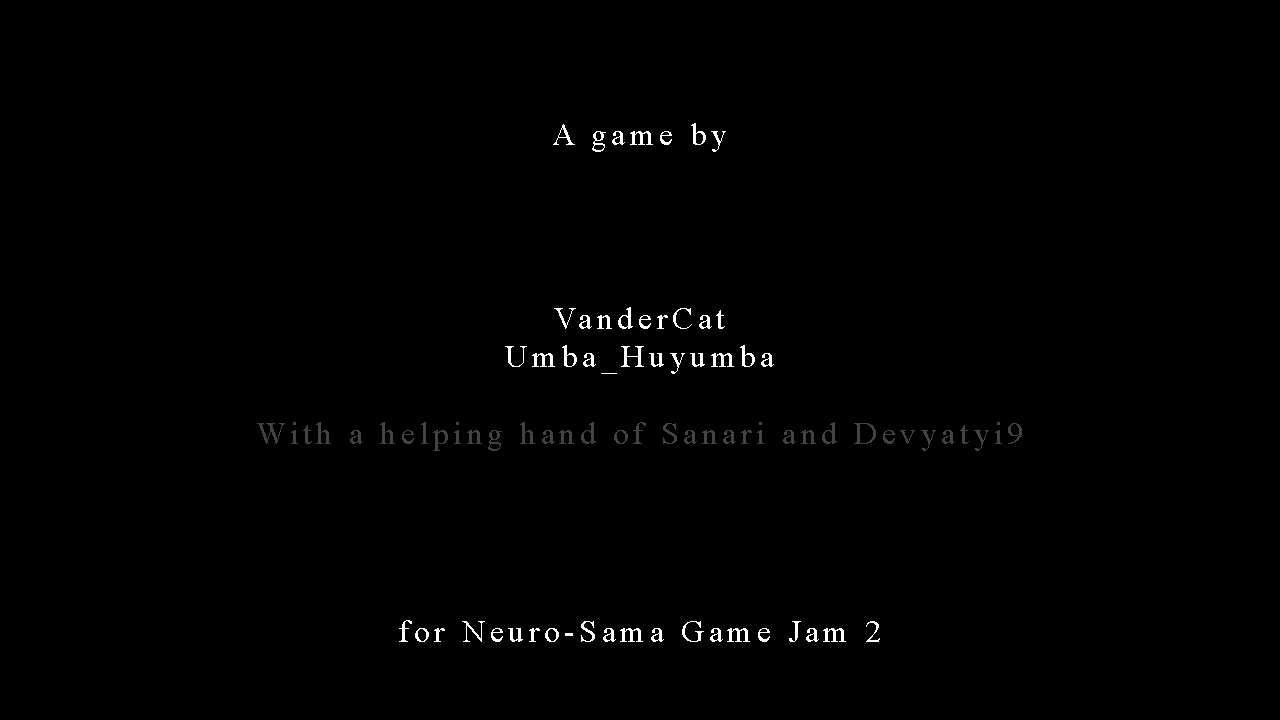
<style>
.page{position:relative;width:1280px;height:720px;background:#000000}
.page>*{position:absolute;margin:0}
.t1{font:32px "TimesNewRomanPSMT";letter-spacing:0.14em;color:#ffffff}
.t2{font:32px "TimesNewRomanPSMT";letter-spacing:0.14em;color:#434343}
</style>
<div class="page">
<p class="t1" style="left:553px;top:123px;width:173px;height:29px">A game by</p>
<p class="t2" style="left:257px;top:307px;width:765px;height:144px;text-align:center"><span class="t1">VanderCat<br>Umba_Huyumba<br><br></span>With a helping hand of Sanari and Devyatyi9</p>
<p class="t1" style="left:399px;top:620px;width:481px;height:22px">for Neuro-Sama Game Jam 2</p>
</div>
